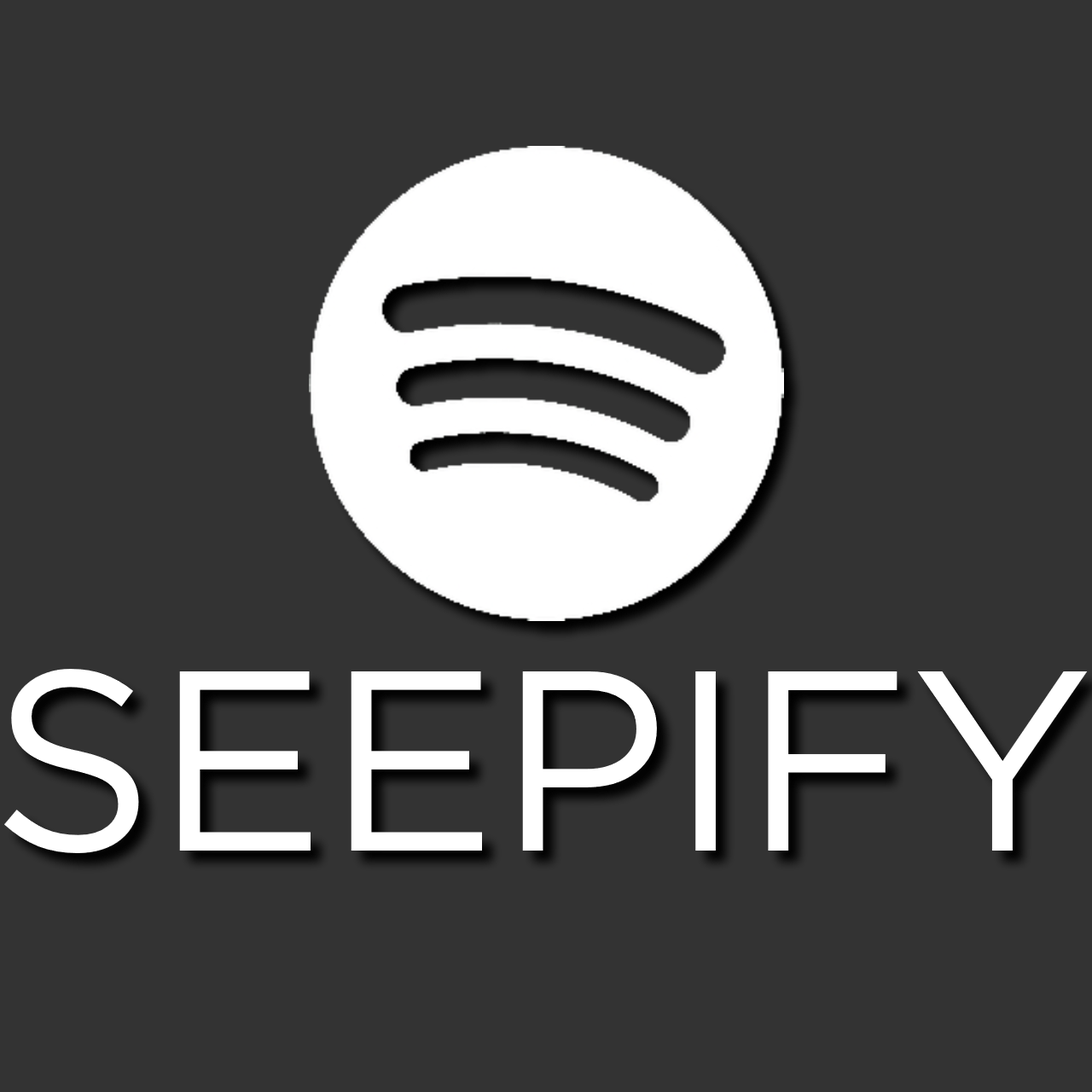
<style>
.page{position:relative;width:1092px;height:1092px;background:#333333}
.page>*{position:absolute;margin:0}
.t1{font:255.9px "Gotham-Book";color:#ffffff}
</style>
<div class="page">
<p class="t1" style="left:3px;top:669px;width:1085px;height:184px">SEEPIFY</p>
</div>
